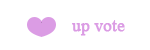
<style>
.page{position:relative;width:150px;height:50px;background:#ffffff}
.page>*{position:absolute;margin:0}
.t1{font:16.7px "TimesNewRomanPSMT";color:#db9ce4;font-weight:bold}
</style>
<div class="page">
<p class="t1" style="left:72px;top:20px;width:53px;height:16px">up vote</p>
</div>
